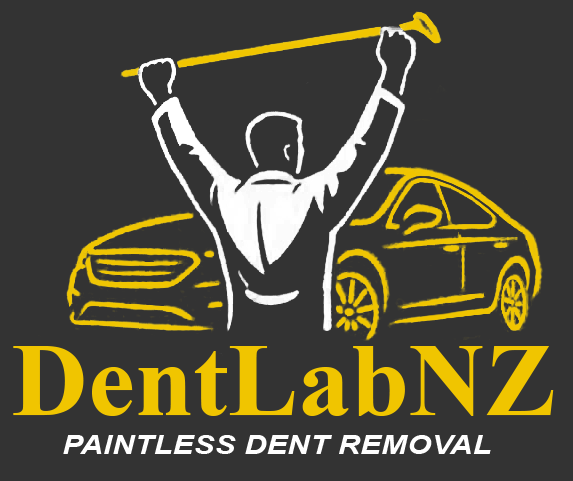
<style>
.page{position:relative;width:573px;height:481px;background:#333333}
.page>*{position:absolute;margin:0}
.t1{font:103.6px "TimesNewRomanPS-BoldMT";color:#f0c500}
.t2{font:25.9px "Arial-BoldItalicMT";color:#ffffff;scale:1.21 1}
</style>
<div class="page">
<p class="t1" style="left:13px;top:346px;width:541px;height:70px">DentLabNZ</p>
<p class="t2" style="left:63px;top:435px;width:428px;height:19px">PAINTLESS DENT REMOVAL</p>
</div>
